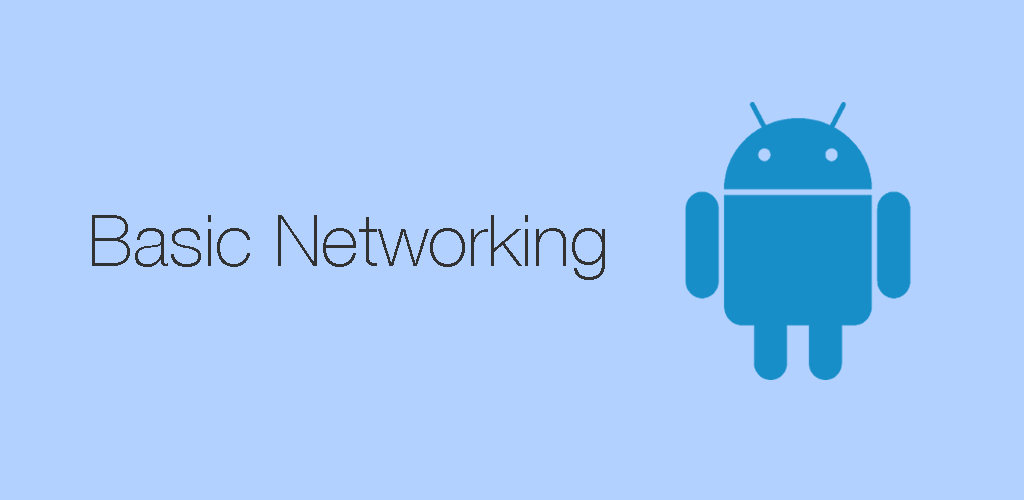
<style>
.page{position:relative;width:1024px;height:500px;background:#b2d1ff}
.page>*{position:absolute;margin:0}
.t1{font:72px "HelveticaNeue-Thin";color:#323232}
</style>
<div class="page">
<p class="t1" style="left:92px;top:215px;width:513px;height:65px">Basic Networking</p>
</div>
